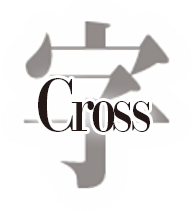
<style>
.page{position:relative;width:193px;height:211px;background:#fefefe}
.page>*{position:absolute;margin:0}
.t1{font:60px "KochoStd-Heavy";letter-spacing:-0.1em;color:#231815;scale:0.8 1}
.t2{font:70px "KochoStd-Heavy";letter-spacing:-0.1em;color:#231815;scale:0.8 1}
</style>
<div class="page">
<p class="t1" style="left:38px;top:78px;width:112px;height:54px"><span class="t2">C</span>ross</p>
</div>
